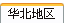
<style>
.page{position:relative;width:64px;height:23px;background:#ffffff}
.page>*{position:absolute;margin:0}
.t1{font:12px "SimSun";color:#151010}
</style>
<div class="page">
<p class="t1" style="left:8px;top:8px;width:47px;height:11px">华北地区</p>
</div>
